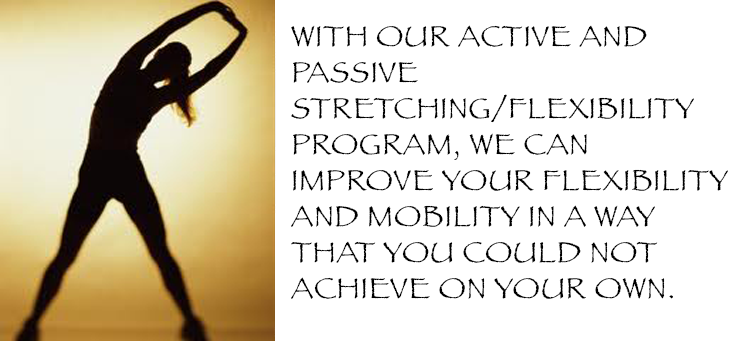
<style>
.page{position:relative;width:738px;height:341px;background:#ffffff}
.page>*{position:absolute;margin:0}
.t1{font:30px "Papyrus";letter-spacing:0.025em;color:#000000}
</style>
<div class="page">
<p class="t1" style="left:291px;top:25px;width:437px;height:274px">WITH OUR ACTIVE AND PASSIVE STRETCHING/FLEXIBILITY PROGRAM, WE CAN IMPROVE YOUR FLEXIBILITY AND MOBILITY IN A WAY THAT YOU COULD NOT ACHIEVE ON YOUR OWN.</p>
</div>
